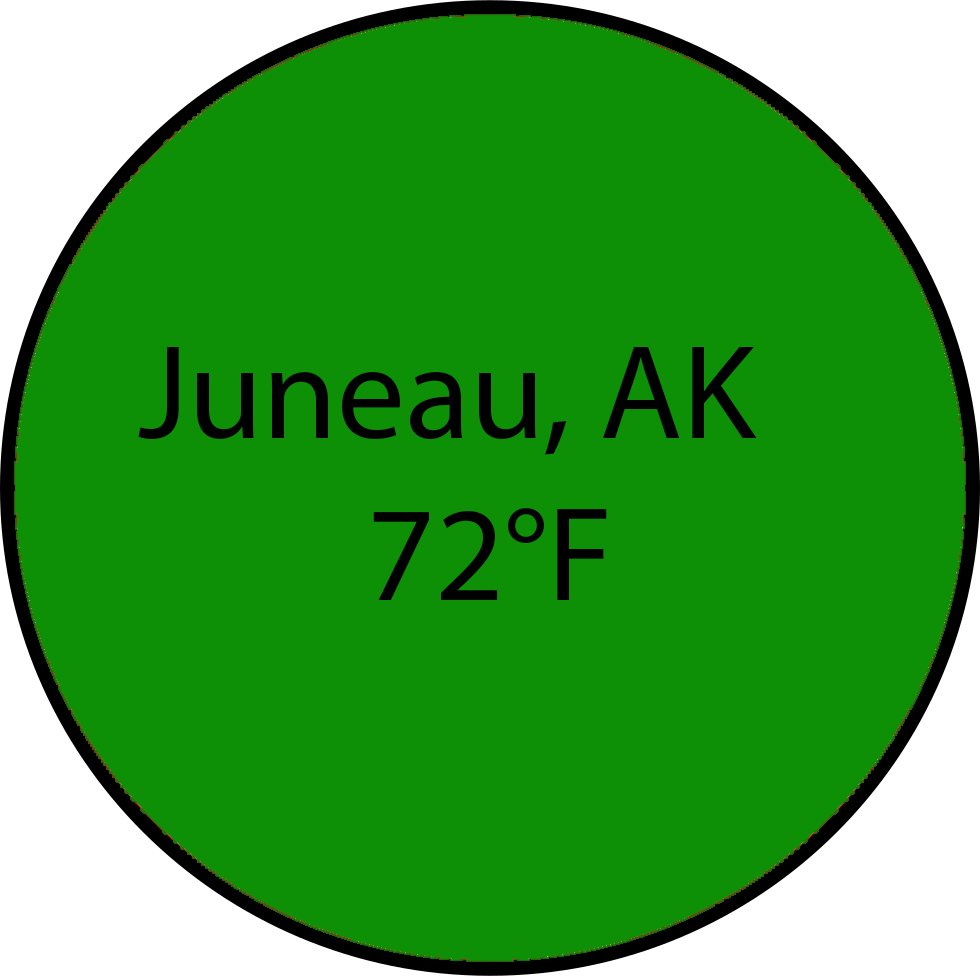
<style>
.page{position:relative;width:980px;height:976px;background:#0d8f06}
.page>*{position:absolute;margin:0}
.t1{font:135px "MyriadPro-Regular";color:#000000}
</style>
<div class="page">
<p class="t1" style="left:138px;top:347px;width:619px;height:253px;text-align:center">Juneau, AK   <br>72°F</p>
</div>
